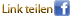
<style>
.page{position:relative;width:71px;height:20px;background:#ffffff}
.page>*{position:absolute;margin:0}
.t1{font:12px "MyriadPro-Regular"}
</style>
<div class="page">
<p class="t1" style="left:2px;top:4px;width:51px;height:9px">Link teilen</p>
</div>
